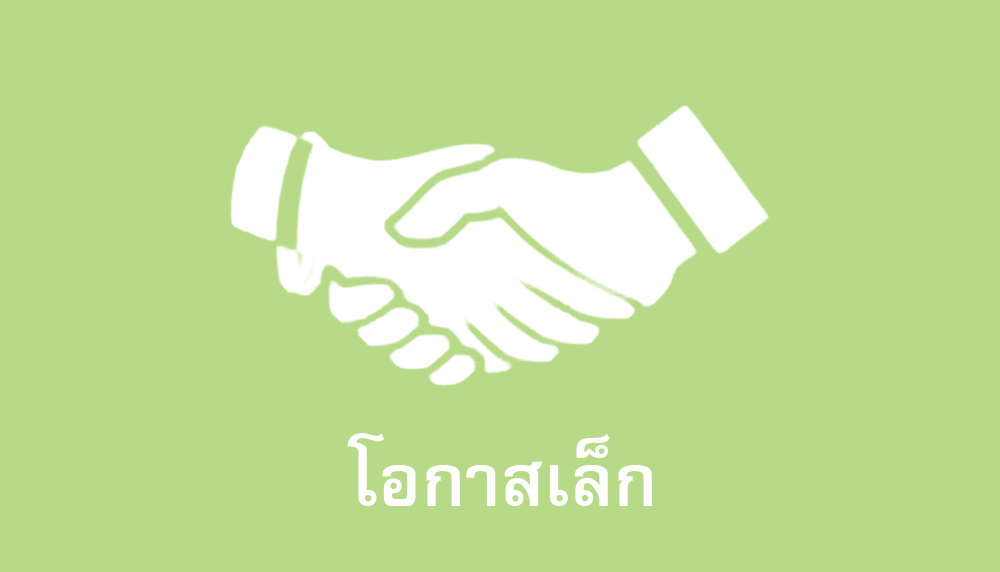
<style>
.page{position:relative;width:1000px;height:572px;background:#b7da88}
.page>*{position:absolute;margin:0}
.t1{font:102px "FreesiaUPCBold";color:#ffffff}
</style>
<div class="page">
<p class="t1" style="left:347px;top:433px;width:305px;height:73px">โอกาสเล็ก</p>
</div>
